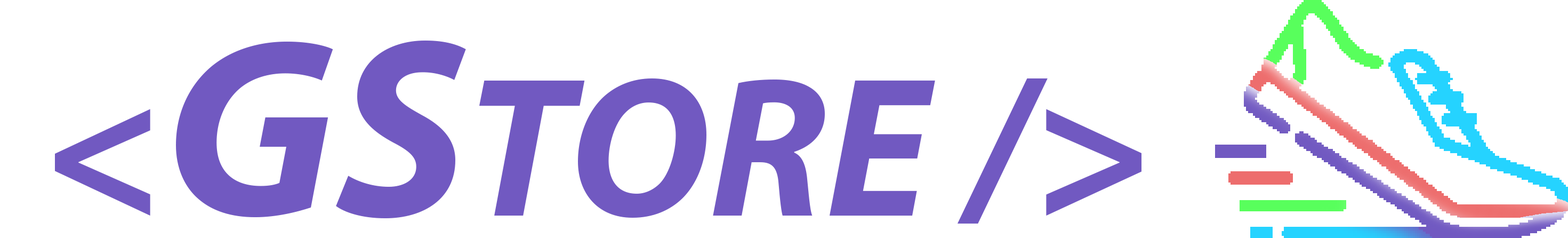
<style>
.page{position:relative;width:1568px;height:238px;background:#ffffff}
.page>*{position:absolute;margin:0}
.t1{font:199.9px "MyriadPro-BoldIt";color:#7159c1}
.t2{font:255.5px "MyriadPro-BoldIt";color:#7159c1}
</style>
<div class="page">
<p class="t1" style="left:55px;top:40px;width:1086px;height:183px">&lt;<span class="t2">GS</span>TORE /&gt;</p>
</div>
